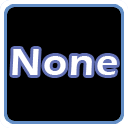
<style>
.page{position:relative;width:128px;height:128px;background:#000000}
.page>*{position:absolute;margin:0}
.t1{font:39px "ErasITC-Demi";letter-spacing:0.05em;color:#ffffff}
</style>
<div class="page">
<p class="t1" style="left:12px;top:49px;width:105px;height:26px">None</p>
</div>
